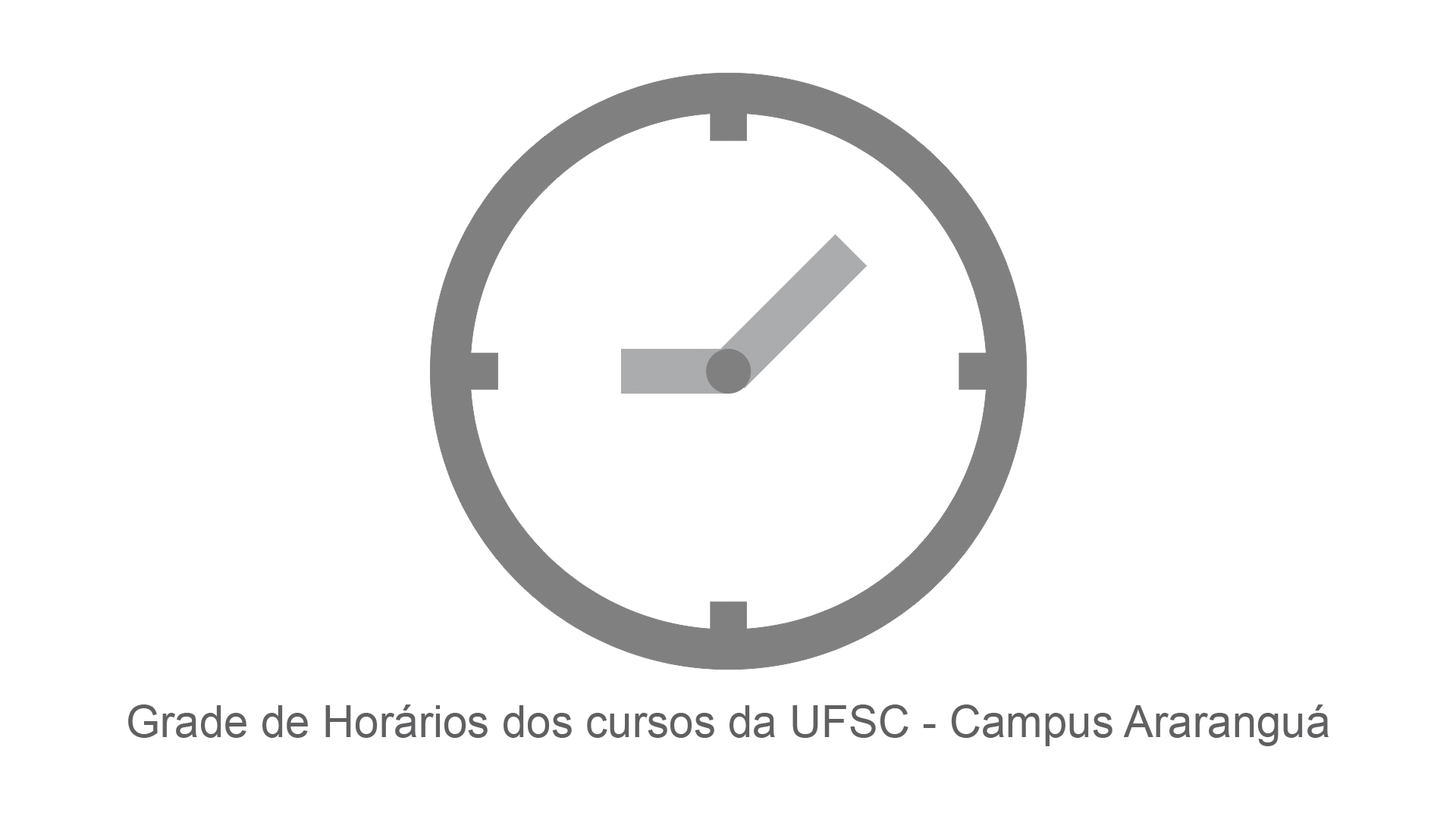
<style>
.page{position:relative;width:1456px;height:819px;background:#ffffff}
.page>*{position:absolute;margin:0}
.t1{font:44.2px "ArialMT";color:#606062}
</style>
<div class="page">
<p class="t1" style="left:128px;top:704px;width:1201px;height:42px">Grade de Horários dos cursos da UFSC - Campus Araranguá</p>
</div>
